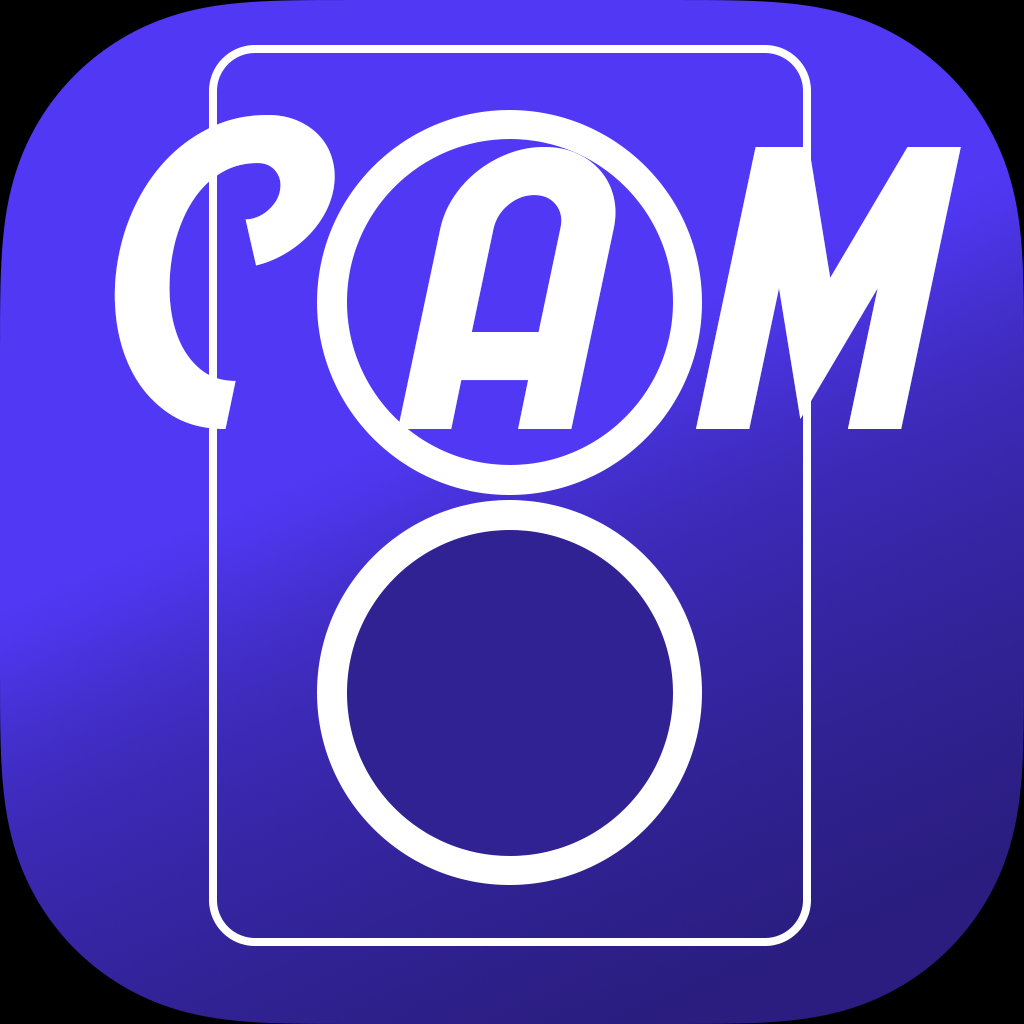
<style>
.page{position:relative;width:1024px;height:1024px;background:#5038f5}
.page>*{position:absolute;margin:0}
.t1{font:403px "Westmeath-Italic";letter-spacing:0.24em;color:#ffffff}
</style>
<div class="page">
<p class="t1" style="left:114px;top:115px;width:847px;height:314px">Cam</p>
</div>
